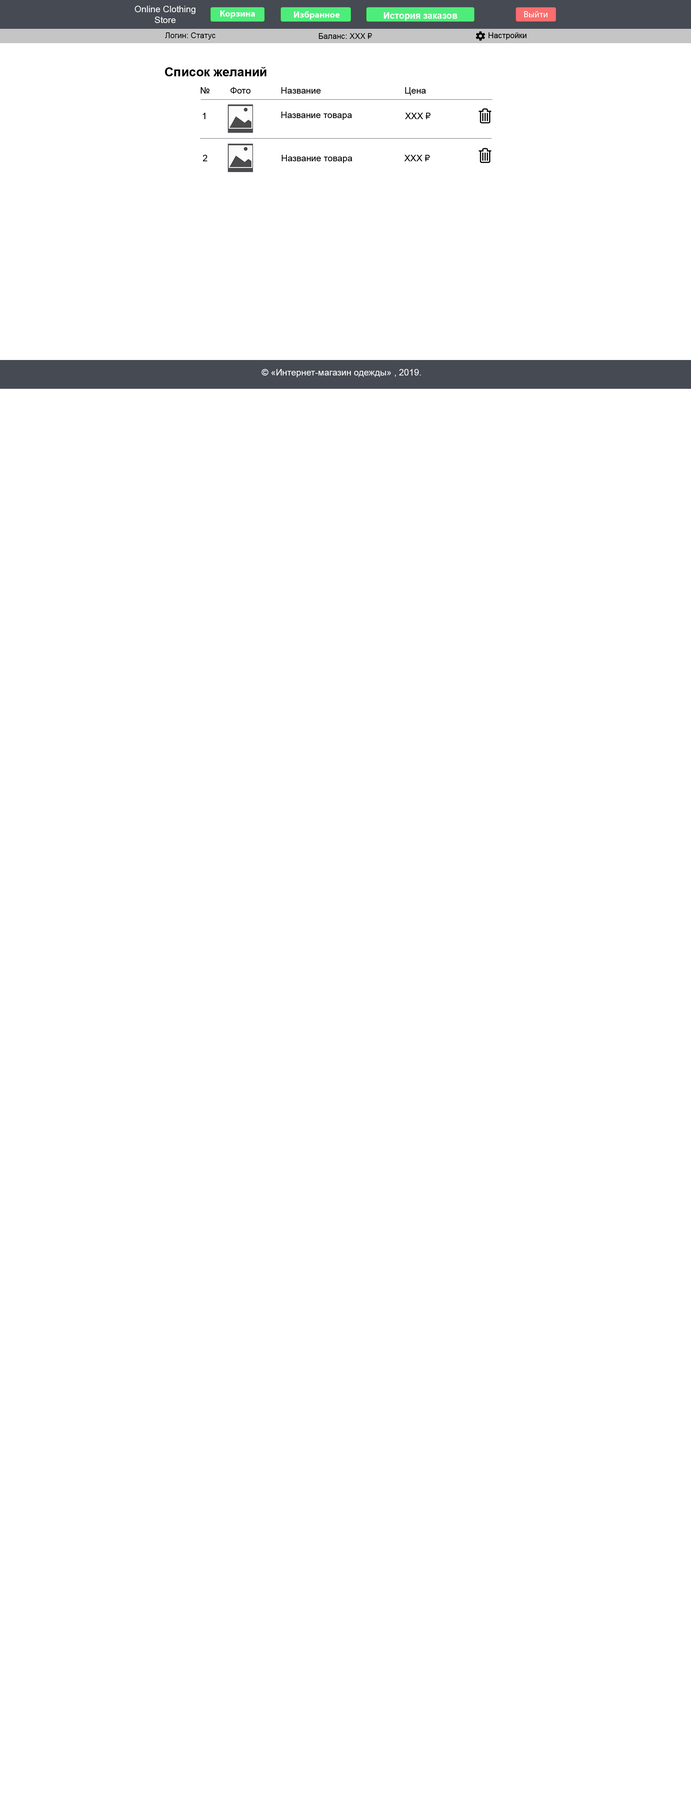
<style>
.page{position:relative;width:691px;height:1800px;background:#ffffff}
.page>*{position:absolute;margin:0}
.t1{font:9px "ArialMT";color:#ffffff}
.t2{font:7.9px "ArialMT";color:#000000}
.t3{font:12.6px "Arial-BoldMT";color:#000000}
.t4{font:9px "ArialMT";color:#000000}
</style>
<div class="page">
<p class="t1" style="left:135px;top:6px;width:60px;height:17px;text-align:center">Online Clothing<br>Store</p>
<p class="t2" style="left:165px;top:32px;width:51px;height:8px">Логин: Статус</p>
<p class="t2" style="left:319px;top:33px;width:53px;height:6px">Баланс: XXX ₽</p>
<p class="t3" style="left:165px;top:67px;width:101px;height:9px">Список желаний</p>
<p class="t4" style="left:201px;top:87px;width:9px;height:7px">№</p>
<p class="t4" style="left:230px;top:87px;width:21px;height:7px">Фото</p>
<p class="t4" style="left:282px;top:87px;width:39px;height:7px">Название</p>
<p class="t4" style="left:405px;top:87px;width:21px;height:8px">Цена</p>
<p class="t4" style="left:203px;top:113px;width:3px;height:6px">1</p>
<p class="t4" style="left:282px;top:112px;width:70px;height:8px">Название товара</p>
<p class="t4" style="left:405px;top:113px;width:26px;height:6px">XXX ₽</p>
<p class="t4" style="left:203px;top:155px;width:4px;height:6px">2</p>
<p class="t4" style="left:282px;top:155px;width:70px;height:8px">Название товара</p>
<p class="t4" style="left:404px;top:155px;width:26px;height:6px">XXX ₽</p>
<p class="t1" style="left:262px;top:369px;width:159px;height:8px">© «Интернет-магазин одежды» , 2019.</p>
</div>
